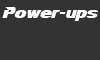
<style>
.page{position:relative;width:100px;height:60px;background:#333333}
.page>*{position:absolute;margin:0}
.t1{font:15px "InfiniteJustice";color:#ffffff}
</style>
<div class="page">
<p class="t1" style="left:2px;top:7px;width:97px;height:14px">Power-ups</p>
</div>
